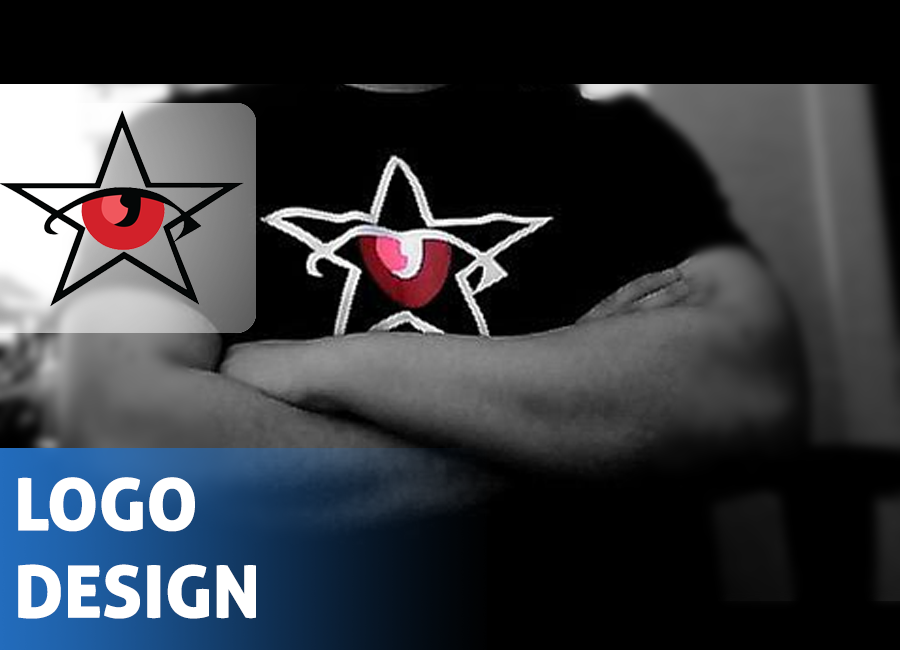
<style>
.page{position:relative;width:900px;height:650px;background:#000000}
.page>*{position:absolute;margin:0}
.t1{font:72.7px "AllerDisplay";color:#ffffff}
</style>
<div class="page">
<p class="t1" style="left:18px;top:477px;width:238px;height:142px">LOGO<br>DESIGN</p>
</div>
